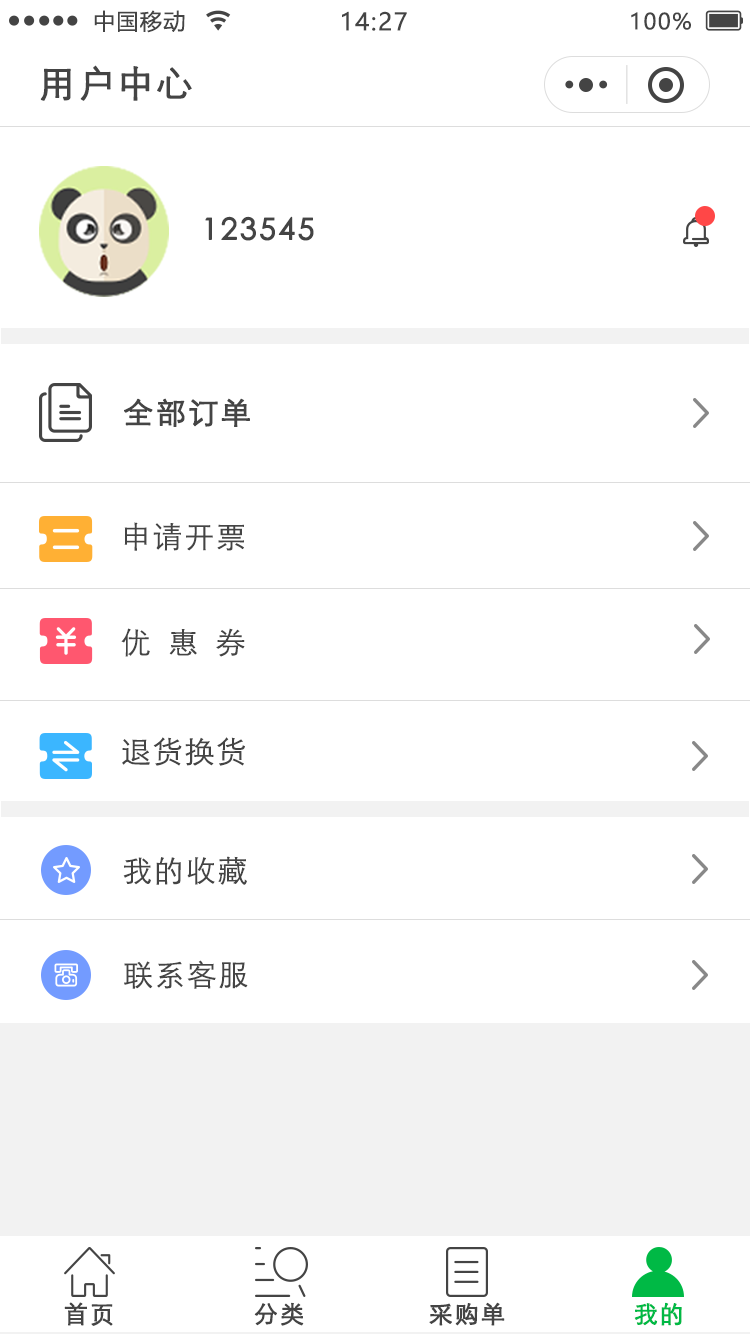
<style>
.page{position:relative;width:750px;height:1334px;background:#ffffff}
.page>*{position:absolute;margin:0}
.t1{font:22px "MicrosoftYaHei";letter-spacing:0.06em;color:#444444}
.t2{font:24px "MicrosoftYaHei";letter-spacing:0.06em;color:#444444}
.t3{font:36px "STXihei";letter-spacing:0.06em;color:#444444;font-weight:bold}
.t4{font:30px "STXihei";letter-spacing:0.06em;color:#444444;font-weight:bold}
.t5{font:30px "STXihei";letter-spacing:0.06em;color:#444444}
.t6{font:30px "STXihei";letter-spacing:0.58em;color:#444444}
.t7{font:24px "STXihei";letter-spacing:0.06em;color:#444444;font-weight:bold}
.t8{font:24px "STXihei";letter-spacing:0.06em;color:#00b945;font-weight:bold}
</style>
<div class="page">
<p class="t1" style="left:94px;top:10px;width:91px;height:23px">中国移动</p>
<p class="t2" style="left:342px;top:11px;width:65px;height:20px">14:27</p>
<p class="t1" style="left:631px;top:12px;width:60px;height:18px">100%</p>
<p class="t3" style="left:40px;top:65px;width:152px;height:36px">用户中心</p>
<p class="t4" style="left:205px;top:216px;width:109px;height:25px">123545</p>
<p class="t4" style="left:124px;top:398px;width:126px;height:29px">全部订单</p>
<p class="t5" style="left:124px;top:522px;width:120px;height:29px">申请开票</p>
<p class="t6" style="left:121px;top:628px;width:124px;height:29px">优惠券</p>
<p class="t5" style="left:122px;top:737px;width:123px;height:29px">退货换货</p>
<p class="t5" style="left:123px;top:856px;width:124px;height:29px">我的收藏</p>
<p class="t5" style="left:124px;top:960px;width:124px;height:29px">联系客服</p>
<p class="t7" style="left:64px;top:1302px;width:49px;height:24px">首页</p>
<p class="t7" style="left:254px;top:1302px;width:50px;height:24px">分类</p>
<p class="t7" style="left:429px;top:1302px;width:76px;height:24px">采购单</p>
<p class="t8" style="left:634px;top:1302px;width:48px;height:24px">我的</p>
</div>
